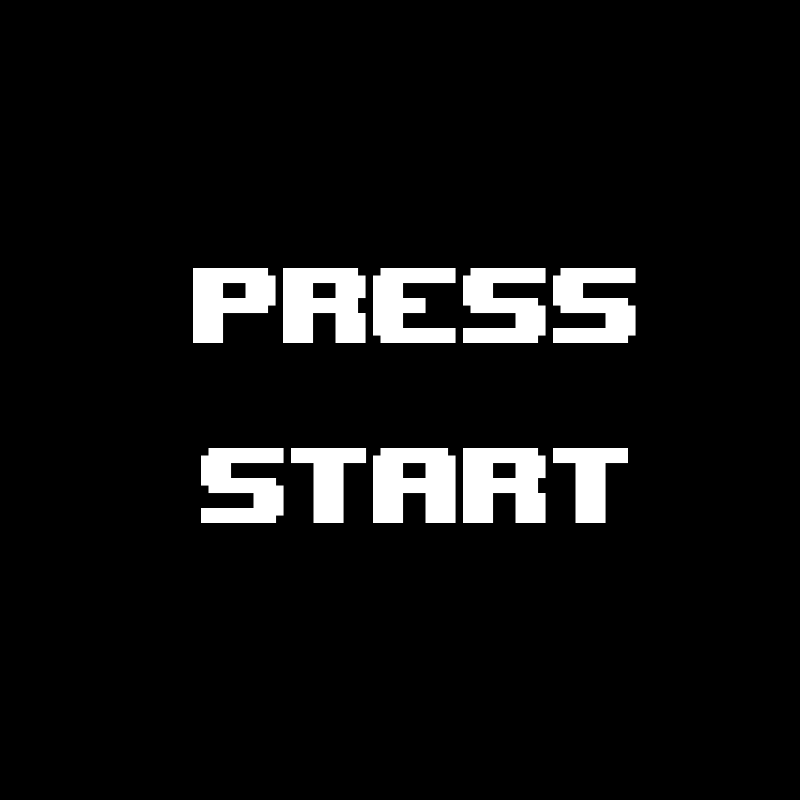
<style>
.page{position:relative;width:800px;height:800px;background:#000000}
.page>*{position:absolute;margin:0}
.t1{font:150px "UpheavalTT-BRK-";color:#ffffff}
</style>
<div class="page">
<p class="t1" style="left:193px;top:268px;width:443px;height:255px">Press Start</p>
</div>
